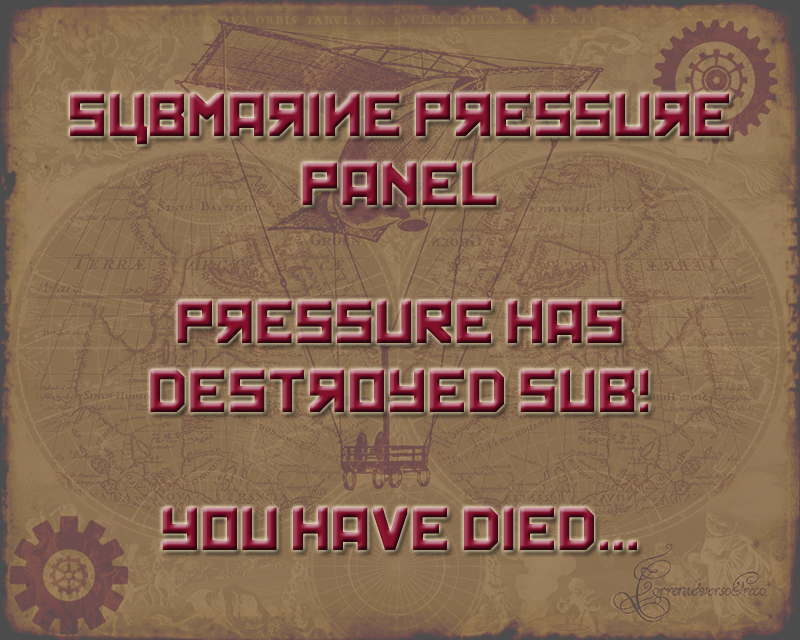
<style>
.page{position:relative;width:800px;height:640px}
.page>*{position:absolute;margin:0}
.t1{font:57.5px "Kremlin"}
</style>
<div class="page">
<p class="t1" style="left:70px;top:93px;width:660px;height:458px;text-align:center">SuBmarinE PrESSUrE<br>PANEL<br><br>PrESSURE HAS<br>DESTrOYED SUB!<br><br>YOU HAVE DIED...</p>
</div>
